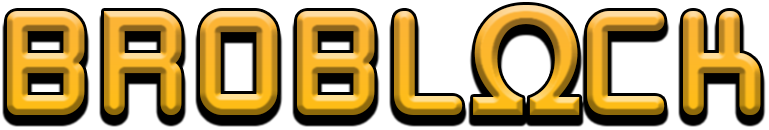
<style>
.page{position:relative;width:769px;height:130px;background:#ffffff}
.page>*{position:absolute;margin:0}
.t1{font:150px "DesignerBlock";letter-spacing:0.1em}
.t2{font:150px "DesignerBlock"}
.t3{font:150px "Arial-BoldMT"}
</style>
<div class="page">
<p class="t1" style="left:7px;top:5px;width:754px;height:110px">BROB<span class="t2">L</span><span class="t3">Ω</span>CK</p>
</div>
